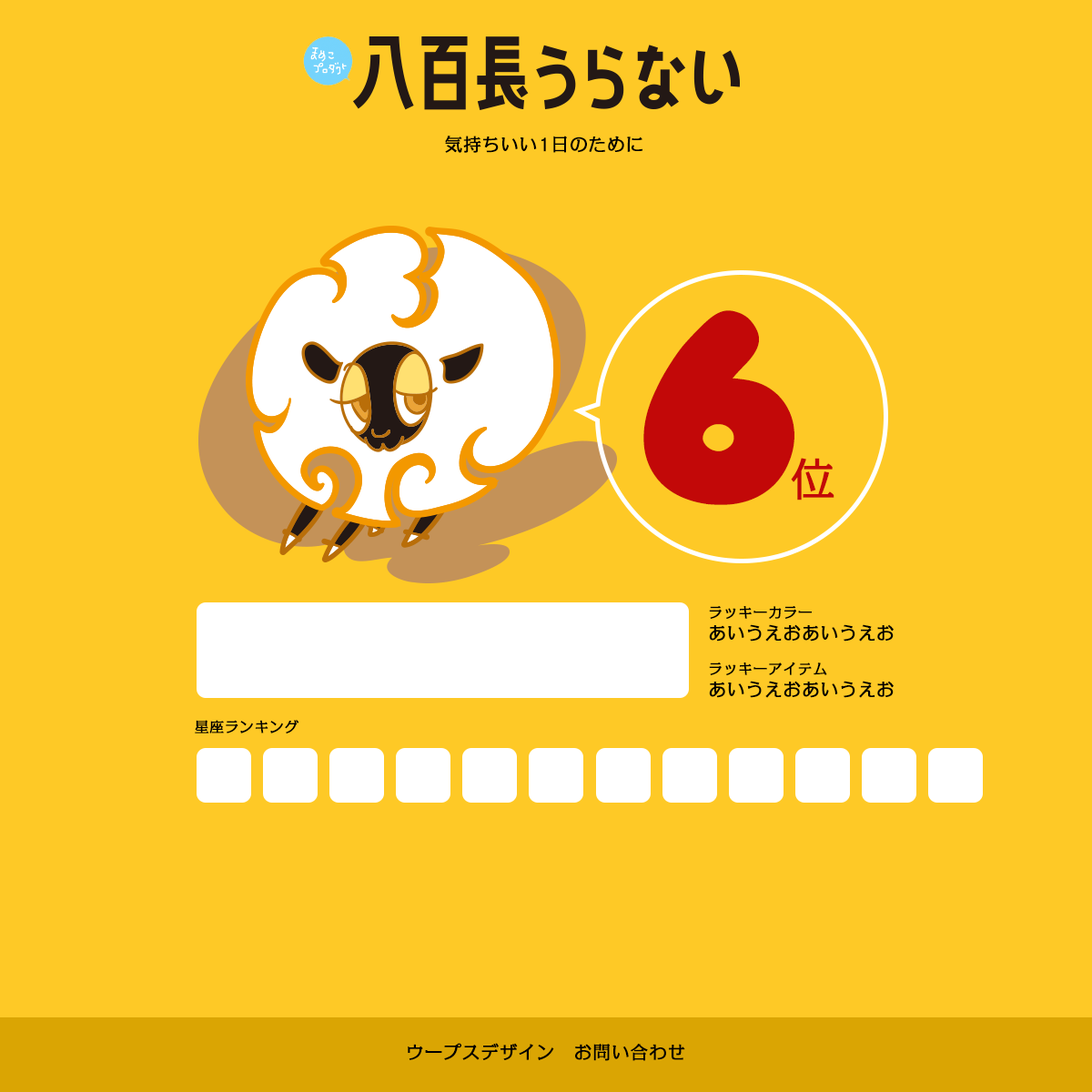
<style>
.page{position:relative;width:1092px;height:1092px;background:#fec926}
.page>*{position:absolute;margin:0}
.t1{font:18.2px "KakuminPro-Regular";color:#000000;font-weight:bold}
.t2{font:260.7px "AnjaElianeaccent-Nornal";color:#c20808;font-weight:bold}
.t3{font:45.5px "KakuminPro-Regular";color:#c20808;font-weight:bold}
.t4{font:14.6px "KakuminPro-Regular";color:#000000;font-weight:bold}
</style>
<div class="page">
<p class="t1" style="left:445px;top:136px;width:197px;height:17px">気持ちいい1日のために</p>
<p class="t2" style="left:643px;top:310px;width:151px;height:195px">6</p>
<p class="t3" style="left:791px;top:458px;width:43px;height:42px">位</p>
<p class="t4" style="left:709px;top:606px;width:103px;height:13px">ラッキーカラー</p>
<p class="t1" style="left:709px;top:624px;width:185px;height:18px">あいうえおあいうえお</p>
<p class="t4" style="left:709px;top:662px;width:118px;height:13px">ラッキーアイテム</p>
<p class="t1" style="left:709px;top:681px;width:185px;height:17px">あいうえおあいうえお</p>
<p class="t4" style="left:195px;top:720px;width:104px;height:13px">星座ランキング</p>
<p class="t1" style="left:408px;top:1043px;width:277px;height:18px">ウープスデザイン　お問い合わせ</p>
</div>
